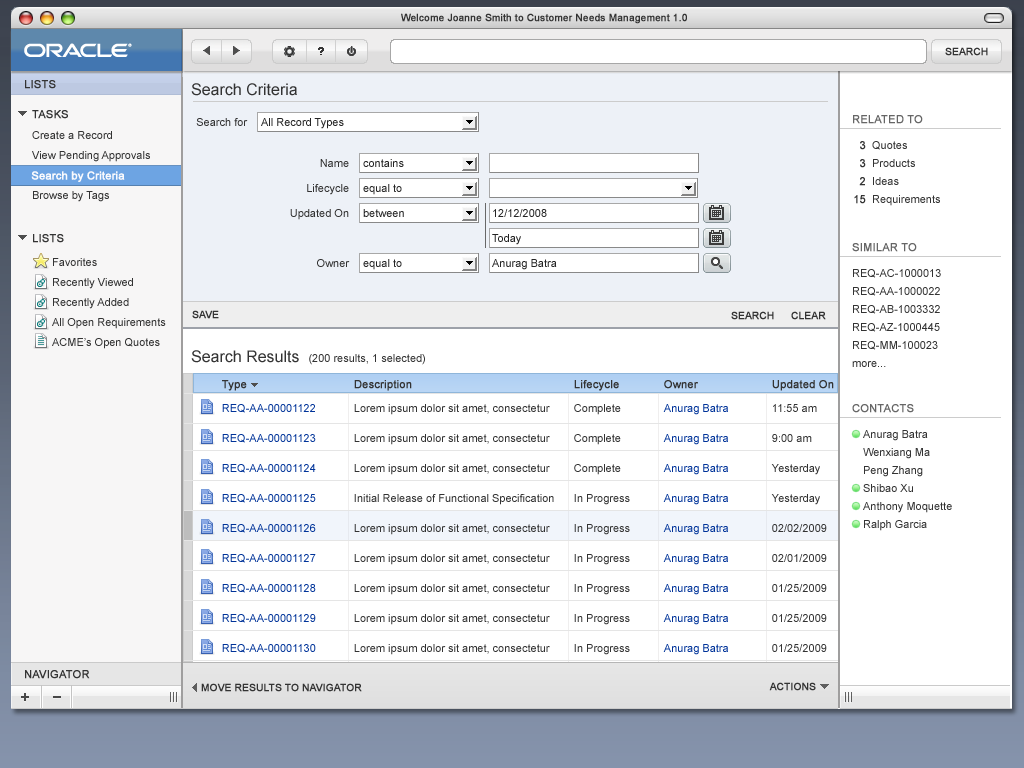
<style>
.page{position:relative;width:1024px;height:768px;background:#ffffff}
.page>*{position:absolute;margin:0}
.t1{font:16px "ArialMT";color:#333333}
.t2{font:11px "ArialMT";color:#333333;text-transform:uppercase;font-weight:bold}
.t3{font:11px "ArialMT";color:#333333}
.t4{font:11px "ArialMT";color:#242424}
.t5{font:11px "ArialMT";color:#666666;text-transform:uppercase;font-weight:bold}
.t6{font:11px "ArialMT";color:#666666;font-weight:bold}
.t7{font:11px/20px "ArialMT";color:#333333}
.t8{font:11px/18px "ArialMT";color:#333333;font-weight:bold}
.t9{font:11px/18px "ArialMT";color:#333333}
.t10{font:11px "ArialMT";color:#fafafd;font-weight:bold}
.t11{font:10px "ArialMT";color:#333333;text-transform:uppercase;font-weight:bold}
.t12{font:10px "ArialMT";color:#333333;font-weight:bold}
.t13{font:11px/10px "ArialMT";color:#003399}
.t14{font:11px "ArialMT";color:#333333;font-weight:bold}
.t15{font:11px/14px "ArialMT";color:#003399}
.t16{font:11px/10px "ArialMT";color:#333333}
.t17{font:11px/8px "ArialMT";color:#333333;font-weight:bold}
.t18{font:11px/14px "ArialMT";color:#333333}
</style>
<div class="page">
<p class="t1" style="left:191px;top:83px;width:106px;height:13px">Search Criteria</p>
<p class="t2" style="left:32px;top:110px;width:36px;height:9px">Tasks</p>
<p class="t3" style="left:196px;top:118px;width:52px;height:8px">Search for</p>
<p class="t4" style="left:261px;top:118px;width:83px;height:11px">All Record Types</p>
<p class="t5" style="left:853px;top:115px;width:70px;height:9px"><span class="t6">R</span>elated To</p>
<p class="t7" style="left:32px;top:131px;width:118px;height:71px">Create a Record<br>View Pending Approvals<br>Search by Criteria<br>Browse by Tags</p>
<p class="t8" style="left:854px;top:141px;width:12px;height:63px;text-align:right">3<br>3<br>2<br>15</p>
<p class="t9" style="left:872px;top:141px;width:68px;height:65px">Quotes<br>Products<br>Ideas<br>Requirements</p>
<p class="t3" style="left:320px;top:159px;width:29px;height:8px">Name</p>
<p class="t4" style="left:363px;top:159px;width:41px;height:8px">contains</p>
<p class="t10" style="left:31px;top:171px;width:94px;height:11px">Search by Criteria</p>
<p class="t3" style="left:307px;top:184px;width:42px;height:11px">Lifecycle</p>
<p class="t4" style="left:363px;top:184px;width:39px;height:11px">equal to</p>
<p class="t3" style="left:290px;top:209px;width:59px;height:11px">Updated On</p>
<p class="t4" style="left:363px;top:209px;width:41px;height:8px">between</p>
<p class="t4" style="left:493px;top:209px;width:54px;height:8px">12/12/2008</p>
<p class="t2" style="left:33px;top:234px;width:31px;height:9px">lists</p>
<p class="t4" style="left:492px;top:234px;width:29px;height:11px">Today</p>
<p class="t5" style="left:852px;top:243px;width:65px;height:9px"><span class="t6">S</span>IMILAR TO</p>
<p class="t7" style="left:52px;top:258px;width:114px;height:91px">Favorites<br>Recently Viewed<br>Recently Added<br>All Open Requirements<br>ACME’s Open Quotes</p>
<p class="t3" style="left:317px;top:259px;width:33px;height:8px">Owner</p>
<p class="t4" style="left:363px;top:259px;width:39px;height:11px">equal to</p>
<p class="t4" style="left:492px;top:259px;width:65px;height:11px">Anurag Batra</p>
<p class="t9" style="left:852px;top:269px;width:89px;height:98px">REQ-AC-1000013<br>REQ-AA-1000022<br>REQ-AB-1003332<br>REQ-AZ-1000445<br>REQ-MM-100023<br>more...</p>
<p class="t11" style="left:192px;top:310px;width:27px;height:9px"><span class="t12">S</span>ave</p>
<p class="t11" style="left:731px;top:311px;width:43px;height:9px">Search</p>
<p class="t11" style="left:791px;top:311px;width:35px;height:9px">Clear</p>
<p class="t3" style="left:191px;top:350px;width:234px;height:15px"><span class="t1">Search Results  </span>(200 results, 1 selected)</p>
<p class="t13" style="left:222px;top:380px;width:94px;height:273px"><span class="t14">Type<br><br></span><span class="t15">REQ-AA-00001122<br></span><br><br>REQ-AA-00001123<br><br><br>REQ-AA-00001124<br><br><br>REQ-AA-00001125<br><br> <br>REQ-AA-00001126<br><br><br>REQ-AA-00001127<br><br><br>REQ-AA-00001128<br><br><br>REQ-AA-00001129<br><br><br>REQ-AA-00001130</p>
<p class="t16" style="left:354px;top:380px;width:200px;height:275px"><span class="t14">De</span><span class="t17">scription<br><br></span><span class="t18">Lorem ipsum dolor sit amet, consectetur <br></span><br><br>Lorem ipsum dolor sit amet, consectetur <br><br><br>Lorem ipsum dolor sit amet, consectetur <br><br><br>Initial Release of Functional Specification<br><br><br>Lorem ipsum dolor sit amet, consectetur<br><br><br>Lorem ipsum dolor sit amet, consectetur <br><br><br>Lorem ipsum dolor sit amet, consectetur <br><br><br>Lorem ipsum dolor sit amet, consectetur <br><br><br>Lorem ipsum dolor sit amet, consectetur</p>
<p class="t16" style="left:574px;top:380px;width:56px;height:275px"><span class="t14">Lifecycle<br><br></span><span class="t18">Complete<br></span><br><br>Complete<br><br><br>Complete<br><br><br>In Progress<br><br><br>In Progress<br><br><br>In Progress<br><br><br>In Progress <br><br><br>In Progress<br><br><br>In Progress</p>
<p class="t13" style="left:663px;top:380px;width:65px;height:275px"><span class="t14">Owner<br><br></span><span class="t15">Anurag Batra<br></span><br><br>Anurag Batra<br><br><br>Anurag Batra<br><br><br>Anurag Batra<br><br><br>Anurag Batra<br><br><br>Anurag Batra<br><br><br>Anurag Batra<br><br><br>Anurag Batra<br><br><br>Anurag Batra</p>
<p class="t16" style="left:771px;top:380px;width:63px;height:272px"><span class="t14">Updated On<br><br></span><span class="t18">11:55 am<br></span><br><br>9:00 am<br><br><br>Yesterday<br><br><br>Yesterday<br><br><br>02/02/2009<br><br><br>02/01/2009<br><br><br>01/25/2009<br><br><br>01/25/2009<br><br><br>01/25/2009</p>
<p class="t5" style="left:852px;top:404px;width:62px;height:9px">contacts</p>
<p class="t9" style="left:863px;top:430px;width:89px;height:101px">Anurag Batra<br>Wenxiang Ma<br>Peng Zhang<br>Shibao Xu<br>Anthony Moquette<br>Ralph Garcia</p>
<p class="t11" style="left:201px;top:683px;width:161px;height:9px">Move results to Navigator</p>
<p class="t11" style="left:769px;top:682px;width:47px;height:9px">actions</p>
</div>
